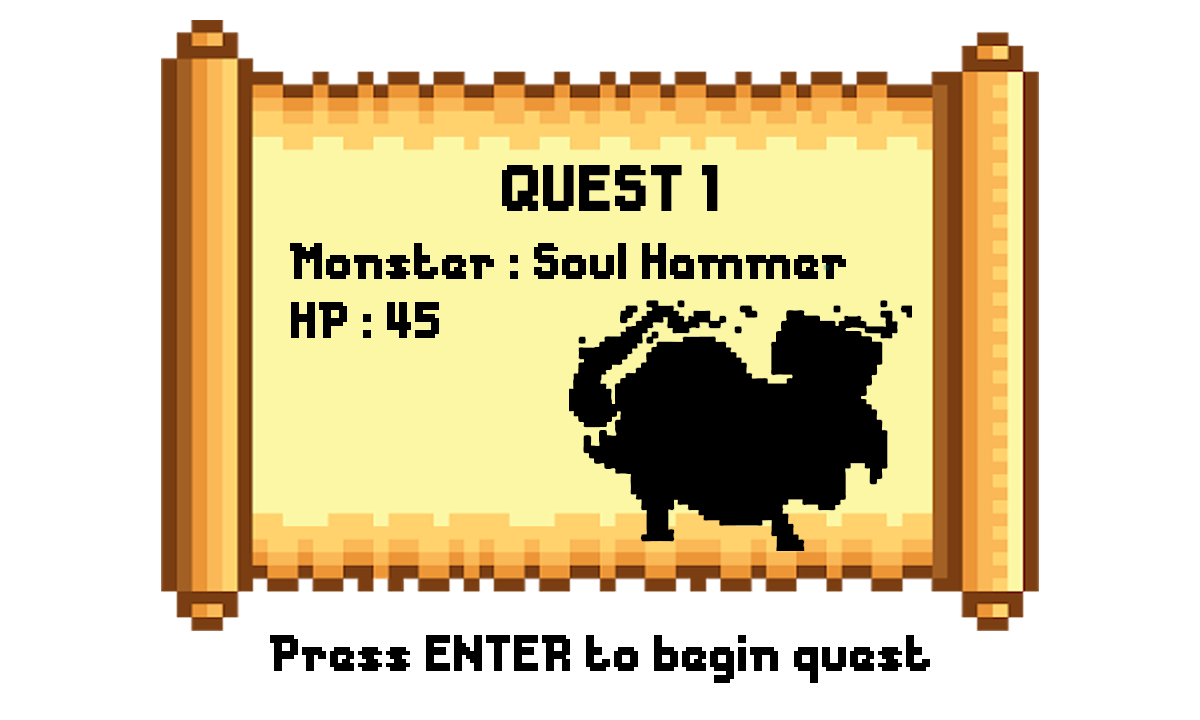
<style>
.page{position:relative;width:1200px;height:720px;background:#ffffff}
.page>*{position:absolute;margin:0}
.t1{font:61.3px "Messe-Duesseldorf";color:#000000}
.t2{font:48px "Messe-Duesseldorf";color:#000000}
</style>
<div class="page">
<p class="t1" style="left:502px;top:165px;width:216px;height:46px">QUEST 1</p>
<p class="t2" style="left:290px;top:243px;width:556px;height:36px">Monster : Soul Hammer</p>
<p class="t2" style="left:291px;top:302px;width:148px;height:36px">HP : 45</p>
<p class="t2" style="left:270px;top:635px;width:660px;height:48px">Press ENTER to begin quest</p>
</div>
